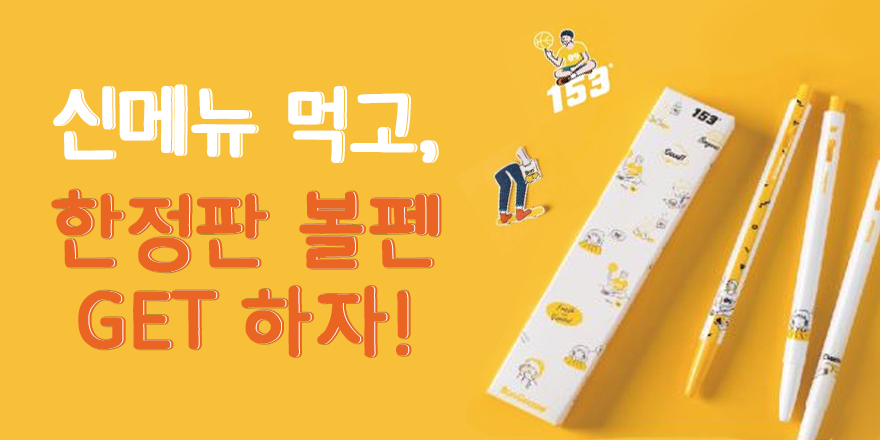
<style>
.page{position:relative;width:880px;height:440px;background:#f8c039}
.page>*{position:absolute;margin:0}
.t1{font:87px "Dovemayo_gothic";letter-spacing:-0.025em;color:#ffffff;text-transform:uppercase;font-weight:bold}
.t2{font:87px/93px "Dovemayo_gothic";letter-spacing:-0.025em;color:#ea6524;text-transform:uppercase;font-weight:bold}
</style>
<div class="page">
<p class="t1" style="left:53px;top:84px;width:383px;height:79px">신메뉴 먹고,</p>
<p class="t2" style="left:51px;top:189px;width:388px;height:168px;text-align:center">한정판 볼펜<br>get 하자!</p>
</div>
